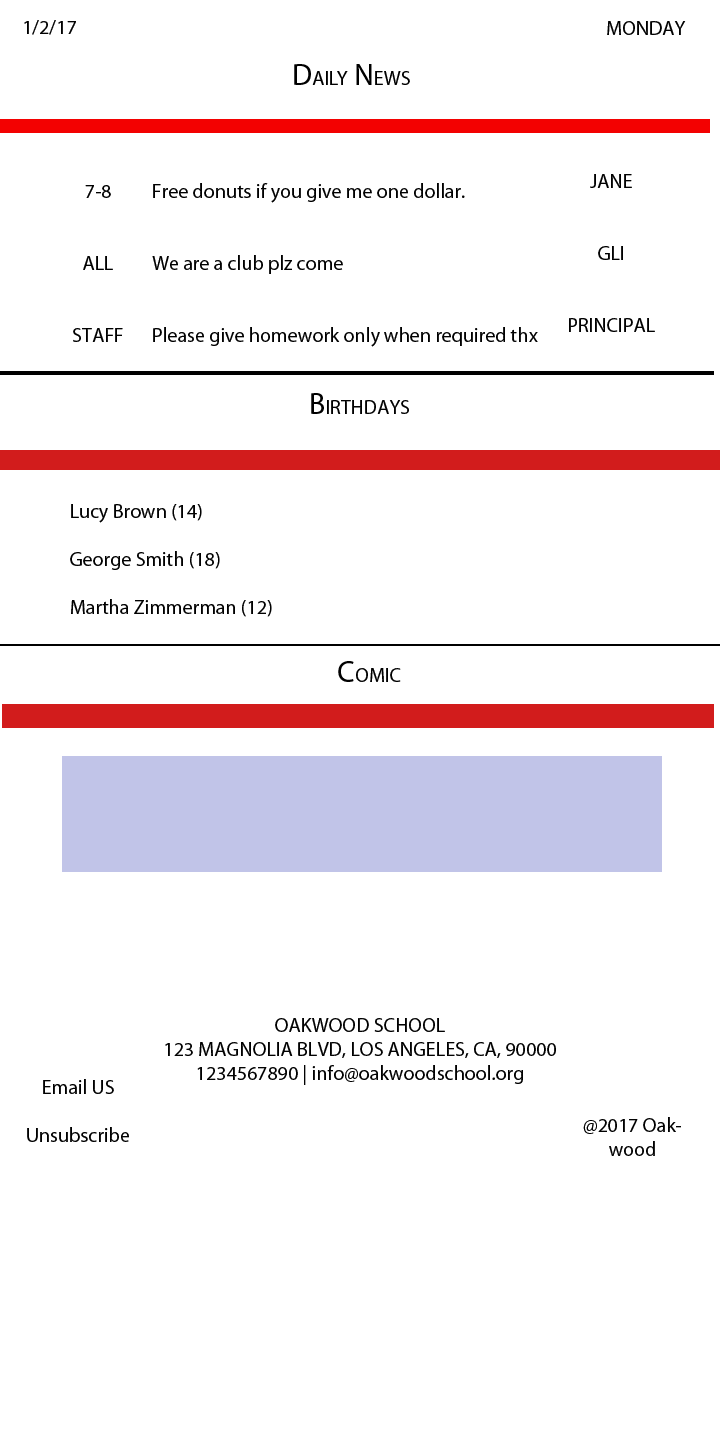
<style>
.page{position:relative;width:720px;height:1440px;background:#ffffff}
.page>*{position:absolute;margin:0}
.t1{font:20px "MyriadPro-Regular";color:#010101}
.t2{font:20px "MyriadPro-Regular";color:#000000}
.t3{font:30px "MyriadPro-Regular";color:#000000}
.t4{font:30px "MyriadPro-Regular";color:#010101}
</style>
<div class="page">
<p class="t1" style="left:24px;top:20px;width:52px;height:15px">1/2/17</p>
<p class="t1" style="left:607px;top:21px;width:79px;height:14px">MONDAY</p>
<p class="t2" style="left:294px;top:64px;width:116px;height:21px"><span class="t3">D</span>AILY<span class="t3"> N</span>EWS</p>
<p class="t1" style="left:569px;top:174px;width:86px;height:158px;text-align:center">JANE<br><br><br>GLI<br><br><br>PRINCIPAL</p>
<p class="t1" style="left:73px;top:185px;width:50px;height:157px">7-8<br><br><br>ALL<br><br><br>STAFF</p>
<p class="t1" style="left:152px;top:183px;width:386px;height:164px">Free donuts if you give me one dollar.<br><br><br>We are a club plz come<br><br><br>Please give homework only when required thx</p>
<p class="t1" style="left:311px;top:393px;width:98px;height:21px"><span class="t4">B</span>IRTHDAYS</p>
<p class="t1" style="left:70px;top:504px;width:202px;height:113px">Lucy Brown (14)<br><br>George Smith (18)<br><br>Martha Zimmerman (12)</p>
<p class="t1" style="left:338px;top:661px;width:63px;height:21px"><span class="t4">C</span>OMIC</p>
<p class="t1" style="left:165px;top:1018px;width:391px;height:67px;text-align:center">OAKWOOD SCHOOL<br>123 MAGNOLIA BLVD, LOS ANGELES, CA, 90000<br>1234567890 | info@oakwoodschool.org</p>
<p class="t1" style="left:27px;top:1079px;width:102px;height:63px;text-align:center">Email US<br><br>Unsubscribe</p>
<p class="t1" style="left:583px;top:1117px;width:98px;height:39px;text-align:center">@2017 Oakwood</p>
</div>
